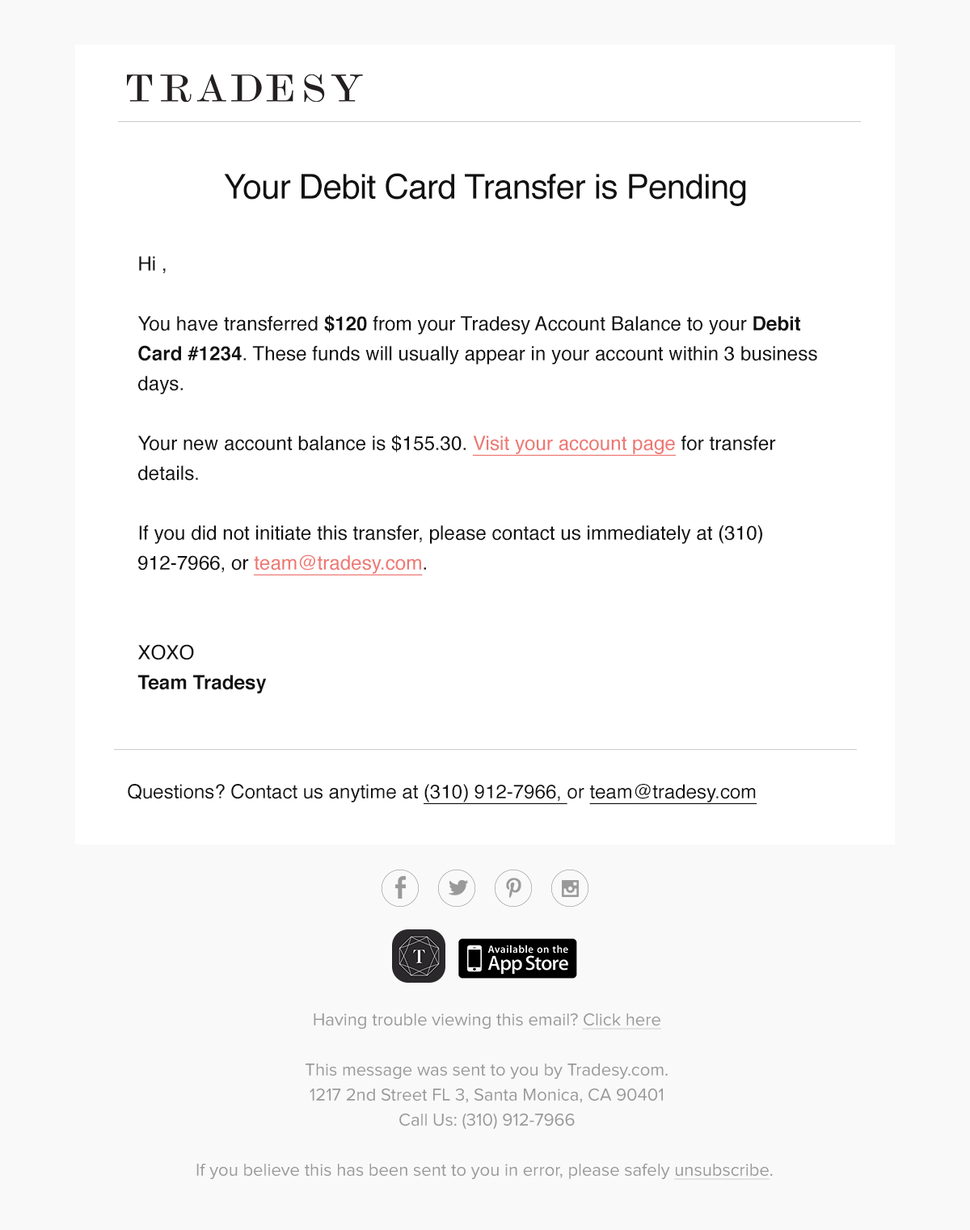
<style>
.page{position:relative;width:970px;height:1230px;background:#ffffff}
.page>*{position:absolute;margin:0}
.t1{font:34.3px "Helvetica";letter-spacing:-0.02em;color:#111111}
.t2{font:19.5px/29.9px "Helvetica";color:#111111}
.t3{font:19.5px/29.9px "Helvetica-Bold";color:#111111}
.t4{font:19.5px/29.9px "Helvetica";color:#ee7873;text-decoration:underline}
.t5{font:19.4px "Helvetica";color:#111111}
.t6{font:19.4px "Helvetica";color:#111111;text-decoration:underline}
.t7{font:17.8px/25px "ProximaNova-Regular";color:#999999}
.t8{font:17.8px/25px "ProximaNova-Regular";color:#999999;text-decoration:underline}
</style>
<div class="page">
<p class="t1" style="left:224px;top:173px;width:522px;height:33px">Your Debit Card Transfer is Pending</p>
<p class="t2" style="left:137px;top:256px;width:680px;height:437px">Hi ,<br><br>You have transferred <span class="t3">$120 </span>from your Tradesy Account Balance to your <span class="t3">Debit Card #1234</span>. These funds will usually appear in your account within 3 business days.<br><br>Your new account balance is $155.30. <span class="t4">Visit your account page</span> for transfer details.<br><br>If you did not initiate this transfer, please contact us immediately at (310) 912-7966, or <span class="t4">team@tradesy.com</span>.<br><br><br>XOXO<br><span class="t3">Team Tradesy</span></p>
<p class="t5" style="left:128px;top:784px;width:629px;height:20px">Questions? Contact us anytime at <span class="t6">(310) 912-7966, </span>or <span class="t6">team@tradesy.com</span></p>
<p class="t7" style="left:196px;top:1012px;width:576px;height:168px;text-align:center">Having trouble viewing this email? <span class="t8">Click here<br></span><br>This message was sent to you by Tradesy.com.<br>1217 2nd Street FL 3, Santa Monica, CA 90401<br>Call Us: (310) 912-7966<br><br>If you believe this has been sent to you in error, please safely <span class="t8">unsubscribe</span>.</p>
</div>
